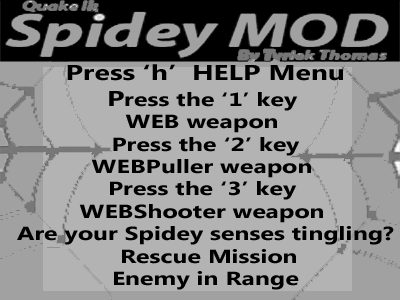
<style>
.page{position:relative;width:400px;height:300px;background:#b3b3b3}
.page>*{position:absolute;margin:0}
.t1{font:18.7px "MicrosoftNewTaiLue-Bold";color:#000000;scale:1.33 1}
.t2{font:21.3px "MicrosoftNewTaiLue-Bold";color:#000000;scale:1.33 1}
</style>
<div class="page">
<p class="t1" style="left:17px;top:64px;width:377px;height:226px;text-align:center"><span class="t2">Press ‘h’  HELP Menu<br>P</span>ress the ‘1’ key <br>WEB weapon <br>Press the ‘2’ key<br>WEBPuller weapon <br>Press the ‘3’ key <br>WEBShooter weapon <br>Are your Spidey senses tingling?<br> Rescue Mission<br>Enemy in Range</p>
</div>
